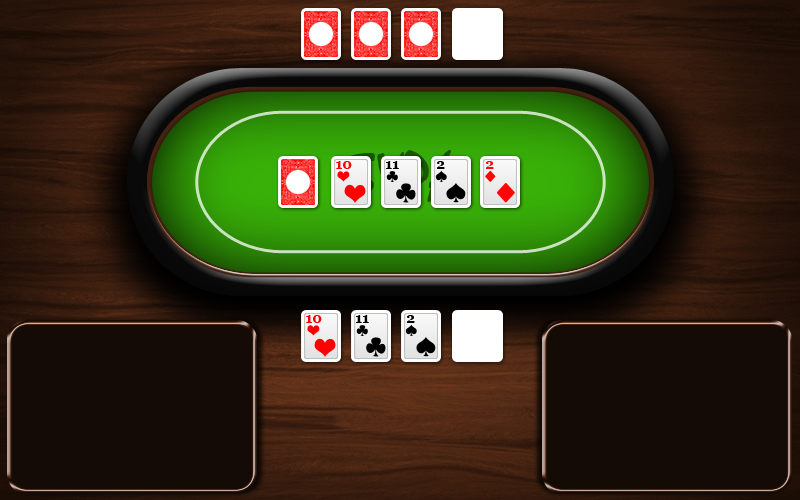
<style>
.page{position:relative;width:800px;height:500px}
.page>*{position:absolute;margin:0}
.t1{font:14px "Georgia-Bold";color:#ff0000;text-transform:uppercase}
.t2{font:14px "Georgia-Bold";color:#000000;text-transform:uppercase}
.t3{font:14px "Georgia-Bold";color:#ff0505;text-transform:uppercase}
</style>
<div class="page">
<p class="t1" style="left:336px;top:161px;width:16px;height:8px">10</p>
<p class="t2" style="left:386px;top:161px;width:13px;height:8px">11</p>
<p class="t2" style="left:437px;top:161px;width:8px;height:8px">2</p>
<p class="t3" style="left:486px;top:161px;width:8px;height:8px">2</p>
<p class="t1" style="left:306px;top:315px;width:16px;height:8px">10</p>
<p class="t2" style="left:356px;top:315px;width:13px;height:8px">11</p>
<p class="t2" style="left:407px;top:315px;width:8px;height:8px">2</p>
</div>
